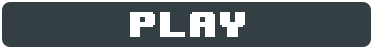
<style>
.page{position:relative;width:373px;height:49px;background:#343f43}
.page>*{position:absolute;margin:0}
.t1{font:30px "8BITWONDERNominal";color:#ffffff}
</style>
<div class="page">
<p class="t1" style="left:130px;top:12px;width:115px;height:25px">play</p>
</div>
